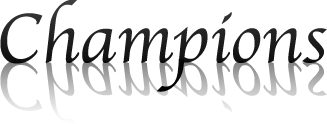
<style>
.page{position:relative;width:327px;height:124px;background:#ffffff}
.page>*{position:absolute;margin:0}
.t1{font:72px "Apple-Chancery";color:#1c1c1c}
</style>
<div class="page">
<p class="t1" style="left:0px;top:0px;width:327px;height:92px">Champions</p>
</div>
